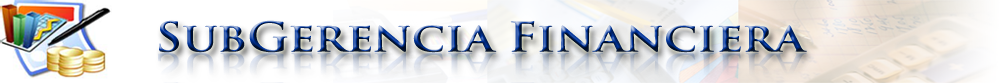
<style>
.page{position:relative;width:1004px;height:83px}
.page>*{position:absolute;margin:0}
.t1{font:39.8px "TrajanPro-Bold";scale:1.18 1}
</style>
<div class="page">
<p class="t1" style="left:159px;top:20px;width:648px;height:33px">SubGerencia Financiera</p>
</div>
